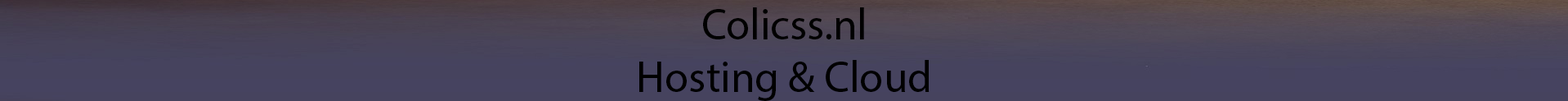
<style>
.page{position:relative;width:1568px;height:101px}
.page>*{position:absolute;margin:0}
.t1{font:43.6px "MyriadPro-Regular";color:#000000}
</style>
<div class="page">
<p class="t1" style="left:639px;top:7px;width:291px;height:94px;text-align:center">Colicss.nl<br>Hosting &amp; Cloud</p>
</div>
